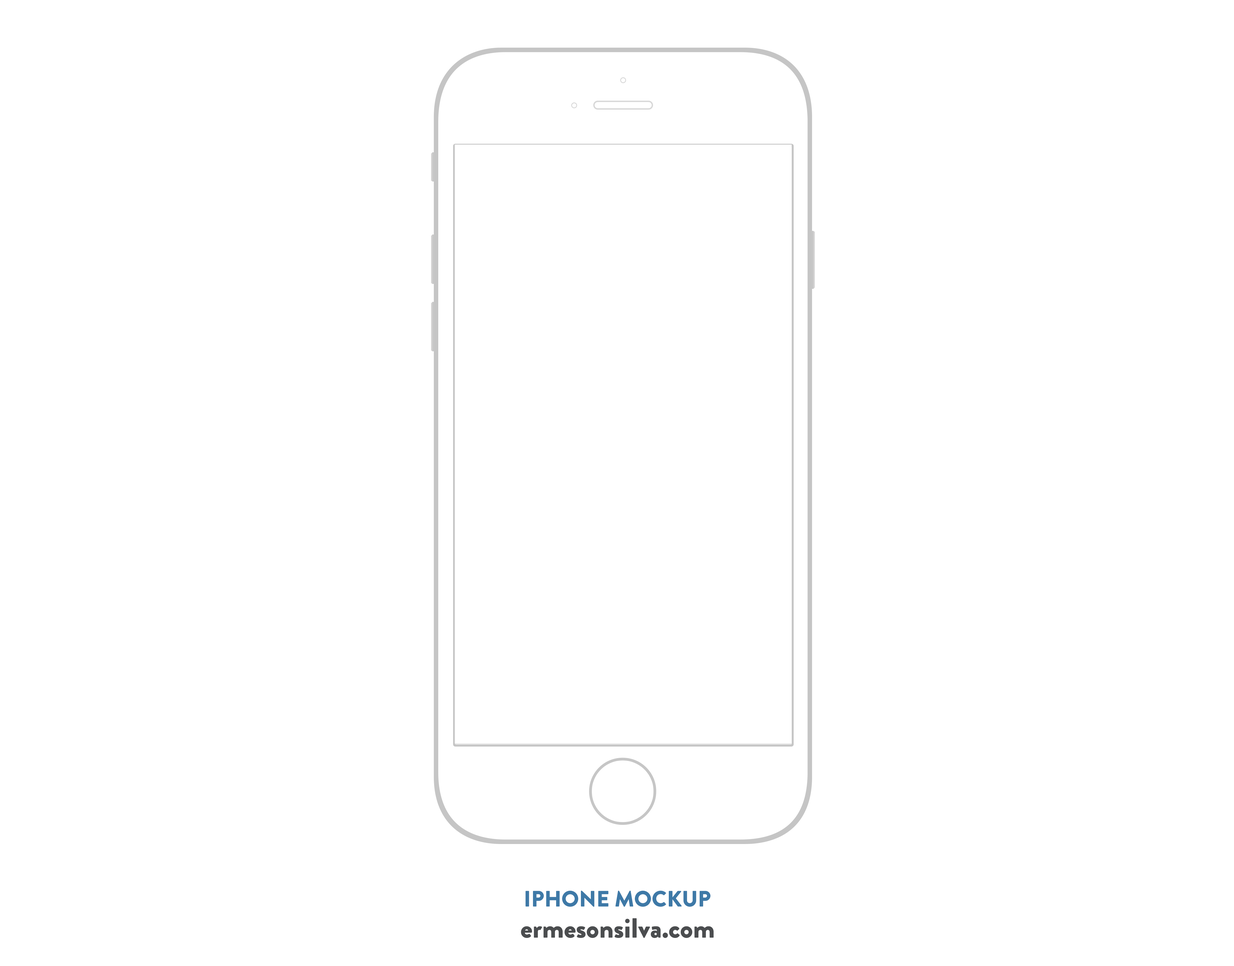
<style>
.page{position:relative;width:1234px;height:966px;background:#ffffff}
.page>*{position:absolute;margin:0}
.t1{font:22.4px "BrandonGrotesque-Black";color:#3e79a7;text-transform:uppercase}
.t2{font:27.8px "BrandonGrotesque-Black";color:#4b4d4f}
</style>
<div class="page">
<p class="t1" style="left:526px;top:891px;width:185px;height:16px">IPHONE MOCKUP</p>
<p class="t2" style="left:521px;top:918px;width:193px;height:20px">ermesonsilva.com</p>
</div>
